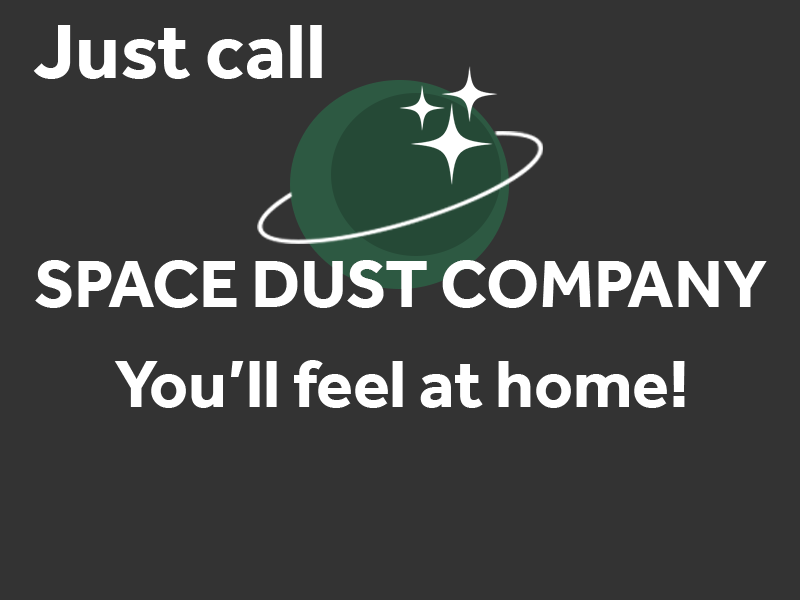
<style>
.page{position:relative;width:800px;height:600px;background:#333333}
.page>*{position:absolute;margin:0}
.t1{font:80.2px "Effra-Bold";color:#ffffff}
.t2{font:68.6px "Effra-Bold";color:#ffffff}
</style>
<div class="page">
<p class="t1" style="left:33px;top:25px;width:289px;height:54px">Just call</p>
<p class="t2" style="left:35px;top:260px;width:732px;height:48px">SPACE DUST COMPANY</p>
<p class="t2" style="left:114px;top:360px;width:571px;height:48px">You’ll feel at home!</p>
</div>
